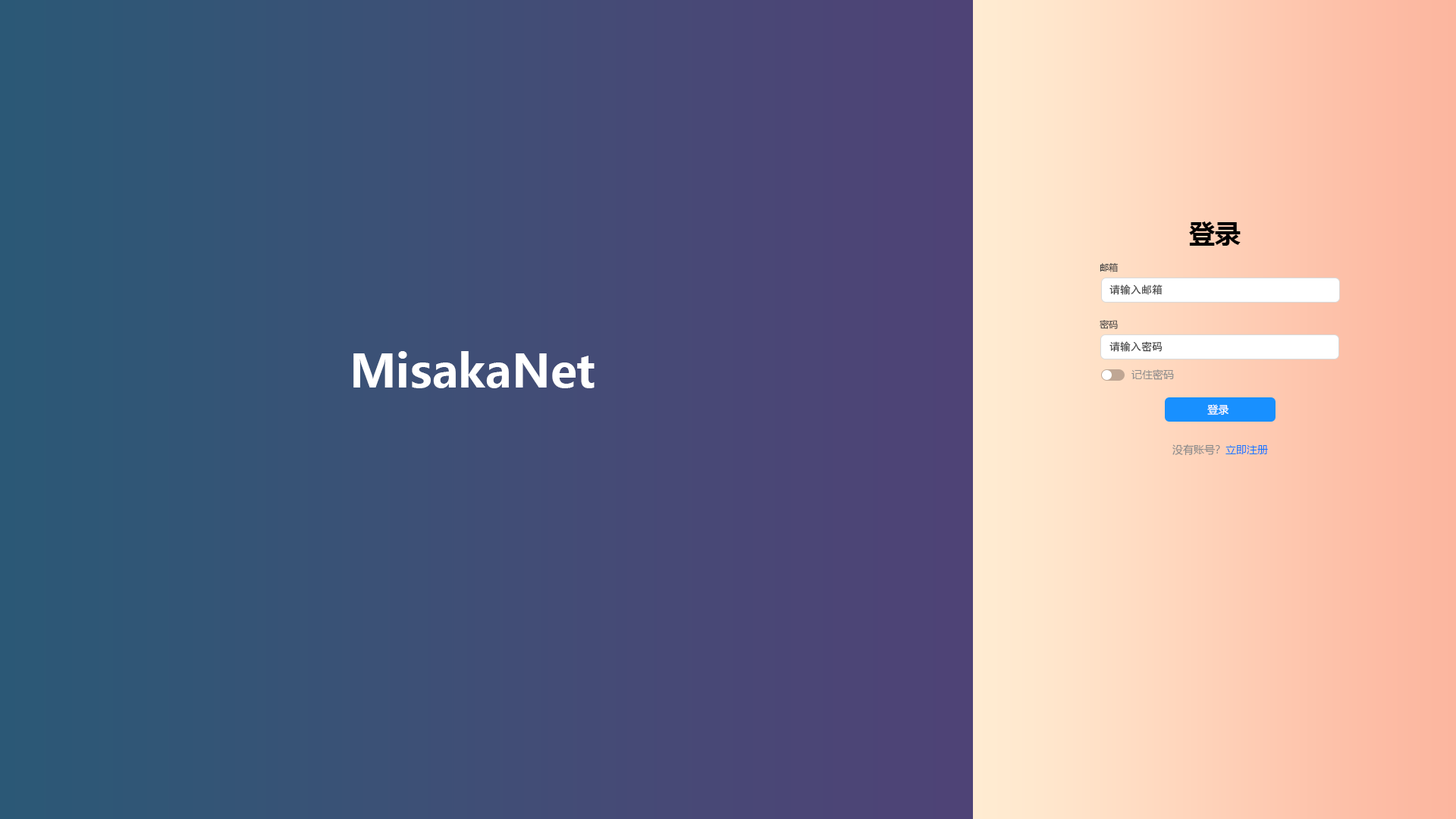
<style>
.page{position:relative;width:1456px;height:819px}
.page>*{position:absolute;margin:0}
.t1{font:25.8px "MicrosoftYaHei-Bold";color:#000000}
.t2{font:9.1px "MicrosoftYaHei";color:#434343}
.t3{font:10.6px "SimHei";color:#3d3d3d}
.t4{font:45.5px "MicrosoftYaHei-Bold";color:#ffffff}
.t5{font:10.6px "MicrosoftYaHei";color:#8c8c8c}
.t6{font:10.6px "MicrosoftYaHei";color:#ffffff}
.t7{font:10.6px "MicrosoftYaHei";color:#1677ff}
</style>
<div class="page">
<p class="t1" style="left:1189px;top:221px;width:52px;height:25px">登录</p>
<p class="t2" style="left:1100px;top:262px;width:19px;height:10px">邮箱</p>
<p class="t3" style="left:1109px;top:284px;width:54px;height:11px">请输入邮箱</p>
<p class="t2" style="left:1100px;top:320px;width:18px;height:9px">密码</p>
<p class="t3" style="left:1109px;top:341px;width:54px;height:11px">请输入密码</p>
<p class="t4" style="left:353px;top:351px;width:242px;height:37px">MisakaNet</p>
<p class="t5" style="left:1131px;top:369px;width:43px;height:11px">记住密码</p>
<p class="t6" style="left:1207px;top:404px;width:22px;height:11px">登录</p>
<p class="t5" style="left:1172px;top:444px;width:96px;height:12px">没有账号？<span class="t7">立即注册</span></p>
</div>
